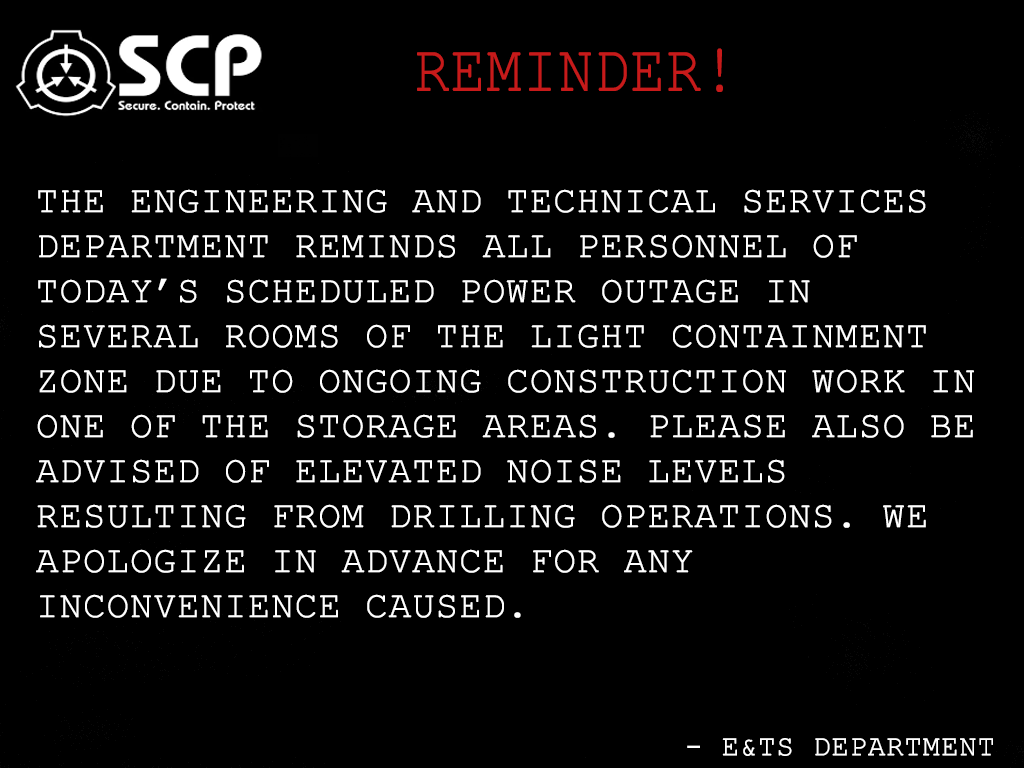
<style>
.page{position:relative;width:1024px;height:768px;background:#000000}
.page>*{position:absolute;margin:0}
.t1{font:66.7px "CourierNewPSMT";color:#c71a1a;text-transform:uppercase;font-weight:bold;scale:0.86 1}
.t2{font:37.5px "CourierNewPSMT";color:#ffffff;text-transform:uppercase;font-weight:bold}
.t3{font:41.7px "CourierNewPSMT";color:#ffffff;text-transform:uppercase;font-weight:bold}
.t4{font:29.2px "CourierNewPSMT";color:#ffffff;text-transform:uppercase;font-weight:bold}
</style>
<div class="page">
<p class="t1" style="left:417px;top:48px;width:306px;height:44px">Reminder!</p>
<p class="t2" style="left:36px;top:189px;width:938px;height:429px;text-align:justify"><span class="t3"><br></span>The Engineering and Technical Services Department reminds all personnel of today’s scheduled power outage in several rooms of the Light Containment zone due to ongoing construction work in one of the storage areas. Please also be advised of elevated noise levels resulting from drilling operations. We apologize in advance for any inconvenience caused.</p>
<p class="t4" style="left:687px;top:738px;width:306px;height:18px">- E&amp;TS department</p>
</div>
